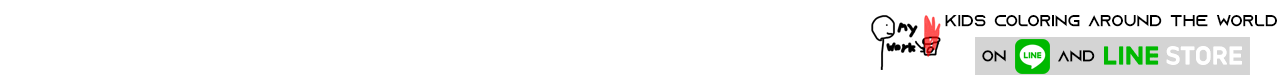
<style>
.page{position:relative;width:1280px;height:75px;background:#ffffff}
.page>*{position:absolute;margin:0}
.t1{font:16px "AzonixRegular";color:#000000}
</style>
<div class="page">
<p class="t1" style="left:945px;top:15px;width:332px;height:12px">Kids Coloring Around The World</p>
<p class="t1" style="left:982px;top:50px;width:24px;height:12px">on</p>
<p class="t1" style="left:1058px;top:50px;width:37px;height:12px">AND</p>
</div>
